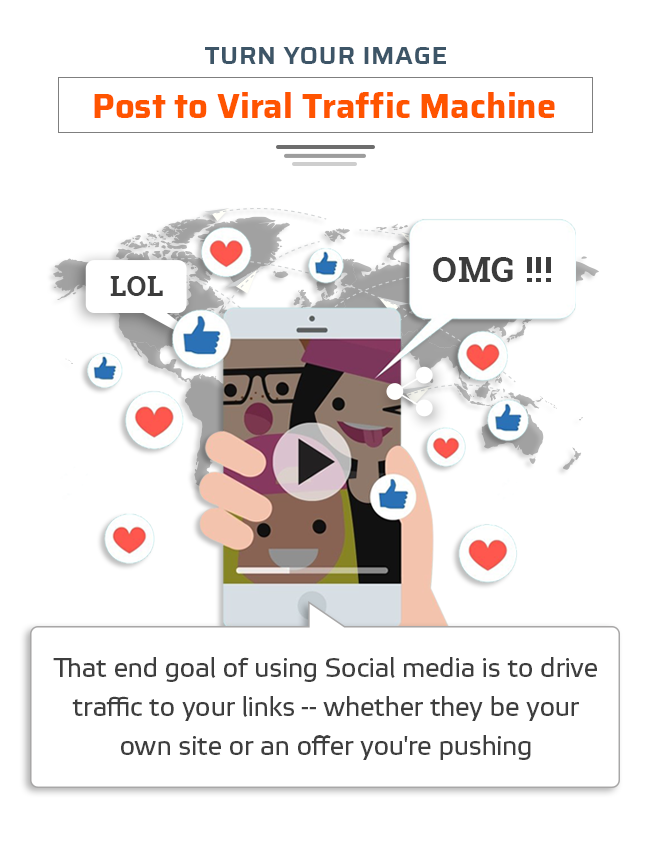
<style>
.page{position:relative;width:650px;height:843px;background:#ffffff}
.page>*{position:absolute;margin:0}
.t1{font:25.5px "Saira-SemiBold";letter-spacing:0.02em;color:#3d5567;text-transform:uppercase}
.t2{font:34.7px "Saira-Bold";color:#ff5400}
.t3{font:35.2px "RobotoSlab-Bold";letter-spacing:0.02em;color:#3c3c3c}
.t4{font:28px "RobotoSlab-Bold";letter-spacing:0.02em;color:#3c3c3c}
.t5{font:27.1px/38.9px "ElektraTextPro";letter-spacing:-0.02em;color:#3e3e3e}
</style>
<div class="page">
<p class="t1" style="left:205px;top:47px;width:241px;height:17px">Turn Your Image</p>
<p class="t2" style="left:94px;top:92px;width:461px;height:26px">Post to Viral Traffic Machine</p>
<p class="t3" style="left:433px;top:257px;width:118px;height:25px">OMG !!!</p>
<p class="t4" style="left:110px;top:276px;width:53px;height:20px">LOL</p>
<p class="t5" style="left:53px;top:657px;width:544px;height:103px;text-align:center">That end goal of using Social media is to drive<br>traffic to your links -- whether they be your<br>own site or an offer you're pushing</p>
</div>
